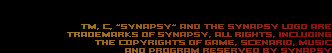
<style>
.page{position:relative;width:332px;height:53px;background:#000000}
.page>*{position:absolute;margin:0}
.t1{font:7px/8px "Quadrangle"}
</style>
<div class="page">
<p class="t1" style="left:67px;top:24px;width:265px;height:29px;text-align:right">TM, C, “SYNAPSY“ AND THE SYNAPSY LOGO ARE<br>TRADEMARKS OF SYNAPSY, ALL RIGHTS, INCLUDING<br>THE COPYRIGHTS OF GAME, SCENARIO, MUSIC<br>AND PROGRAM RESERVED BY SYNAPSY</p>
</div>
